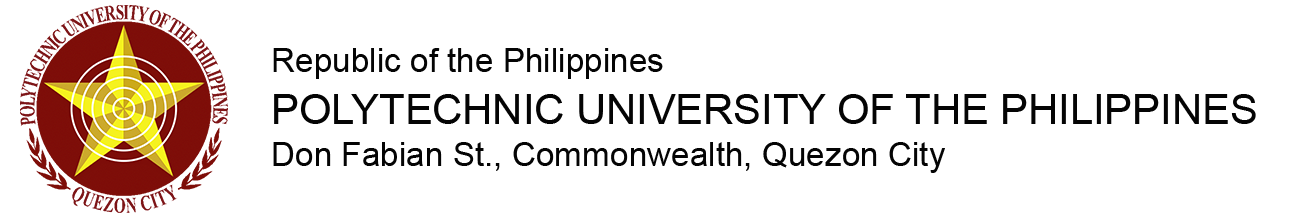
<style>
.page{position:relative;width:1299px;height:213px;background:#ffffff}
.page>*{position:absolute;margin:0}
.t1{font:33.3px "ArialMT";color:#040404}
.t2{font:41.7px "ArialMT";color:#040404}
</style>
<div class="page">
<p class="t1" style="left:273px;top:48px;width:390px;height:31px">Republic of the Philippines</p>
<p class="t2" style="left:274px;top:94px;width:982px;height:30px">POLYTECHNIC UNIVERSITY OF THE PHILIPPINES</p>
<p class="t1" style="left:273px;top:142px;width:672px;height:31px">Don Fabian St., Commonwealth, Quezon City</p>
</div>
